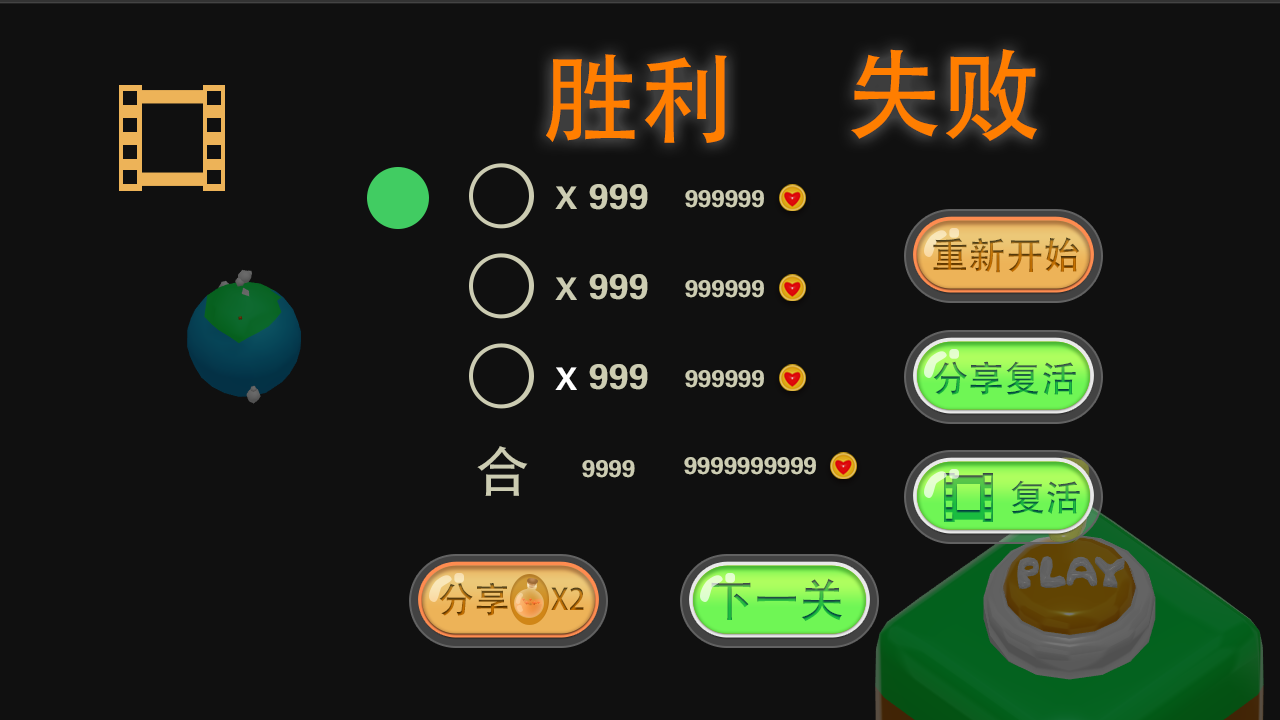
<style>
.page{position:relative;width:1280px;height:720px;background:#101010}
.page>*{position:absolute;margin:0}
.t1{font:98.1px "AdobeHeitiStd-Regular";color:#ff7e00}
.t2{font:35.6px "FZZYJW--GB1-0";color:#ccccb2}
.t3{font:31.1px "FZZYJW--GB1-0";color:#ccccb2}
.t4{font:24px "FZZYJW--GB1-0";color:#ccccb2}
.t5{font:37.5px "AdobeHeitiStd-Regular"}
.t6{font:36.4px "AdobeHeitiStd-Regular"}
.t7{font:31.1px "FZZYJW--GB1-0";color:#ffffff}
.t8{font:54.3px "AdobeHeitiStd-Regular";color:#ccccb2}
.t9{font:45.4px "AdobeHeitiStd-Regular"}
.t10{font:36px "AdobeHeitiStd-Regular"}
.t11{font:29.4px "AdobeHeitiStd-Regular"}
</style>
<div class="page">
<p class="t1" style="left:546px;top:54px;width:181px;height:89px">胜利</p>
<p class="t1" style="left:851px;top:49px;width:186px;height:92px">失败</p>
<p class="t2" style="left:589px;top:184px;width:59px;height:26px">999</p>
<p class="t3" style="left:555px;top:186px;width:22px;height:23px">X</p>
<p class="t4" style="left:685px;top:190px;width:79px;height:18px">999999</p>
<p class="t5" style="left:933px;top:237px;width:147px;height:36px">重新开始</p>
<p class="t3" style="left:555px;top:277px;width:22px;height:23px">X</p>
<p class="t2" style="left:589px;top:274px;width:59px;height:26px">999</p>
<p class="t4" style="left:685px;top:280px;width:79px;height:18px">999999</p>
<p class="t2" style="left:589px;top:364px;width:59px;height:26px">999</p>
<p class="t6" style="left:933px;top:361px;width:143px;height:34px">分享复活</p>
<p class="t7" style="left:555px;top:367px;width:22px;height:23px">X</p>
<p class="t4" style="left:685px;top:370px;width:79px;height:18px">999999</p>
<p class="t8" style="left:477px;top:446px;width:51px;height:50px">合</p>
<p class="t4" style="left:582px;top:460px;width:53px;height:18px">9999</p>
<p class="t4" style="left:684px;top:457px;width:132px;height:18px">9999999999</p>
<p class="t6" style="left:1011px;top:480px;width:69px;height:34px">复活</p>
<p class="t9" style="left:711px;top:578px;width:131px;height:43px">下一关</p>
<p class="t10" style="left:439px;top:583px;width:69px;height:33px">分享</p>
<p class="t11" style="left:551px;top:587px;width:33px;height:23px">X2</p>
</div>
